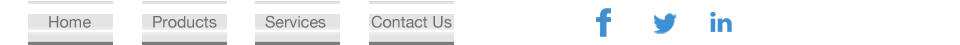
<style>
.page{position:relative;width:960px;height:45px;background:#ffffff}
.page>*{position:absolute;margin:0}
.t1{font:16px "HelveticaNeue";color:#6f6d6e}
</style>
<div class="page">
<p class="t1" style="left:49px;top:16px;width:42px;height:12px">Home</p>
<p class="t1" style="left:153px;top:16px;width:64px;height:12px">Products</p>
<p class="t1" style="left:265px;top:15px;width:61px;height:13px">Services</p>
<p class="t1" style="left:371px;top:15px;width:81px;height:13px">Contact Us</p>
</div>
